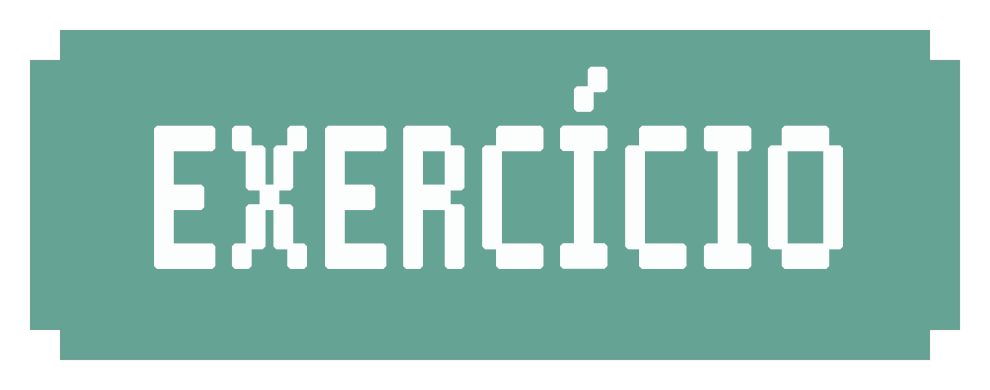
<style>
.page{position:relative;width:990px;height:390px;background:#65a394}
.page>*{position:absolute;margin:0}
.t1{font:255px "Pixelade";letter-spacing:0.025em;color:#fcfefe;font-weight:bold;scale:0.71 1}
</style>
<div class="page">
<p class="t1" style="left:154px;top:66px;width:689px;height:203px">EXERCÍCIO</p>
</div>
